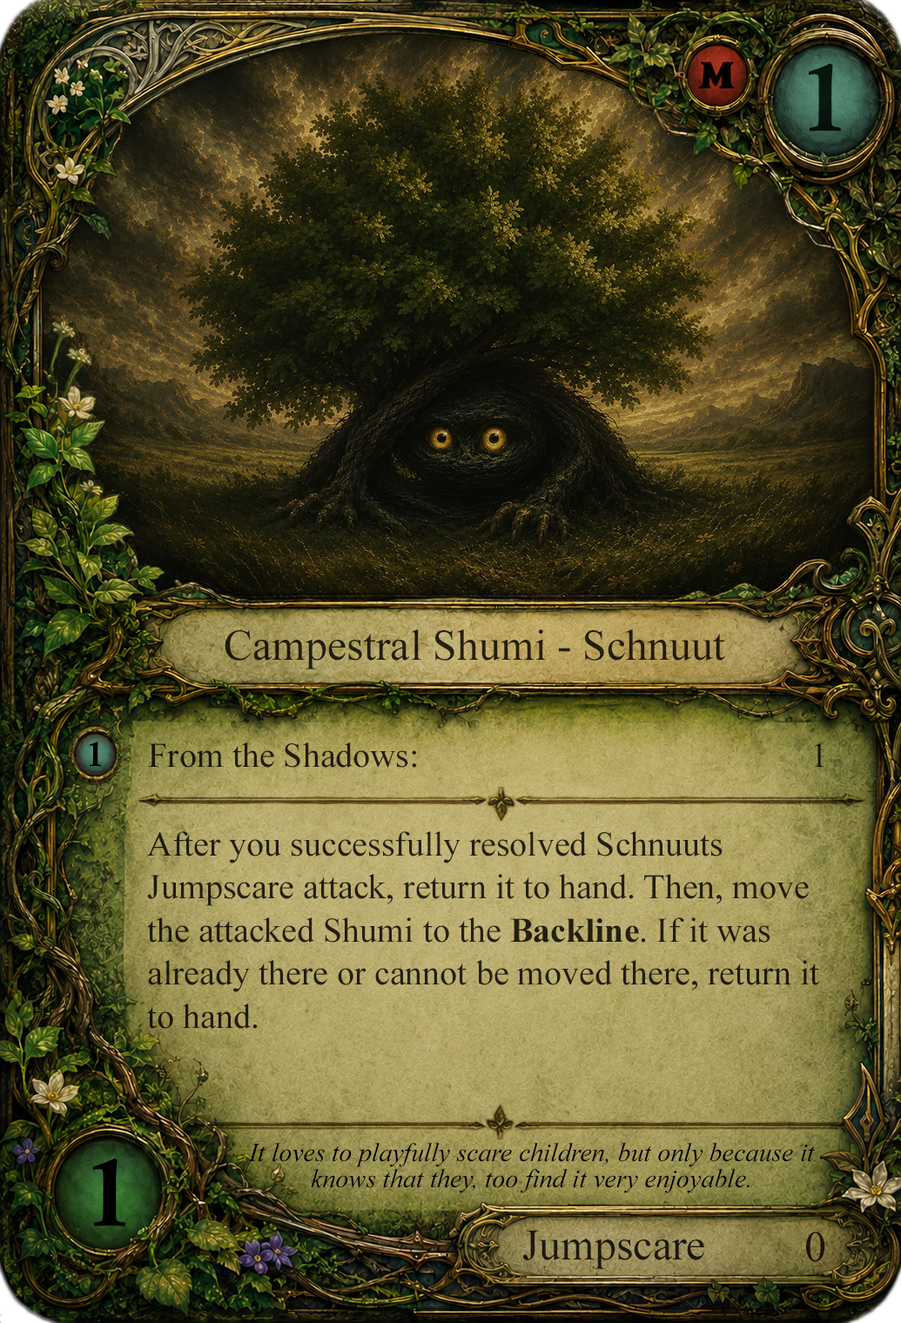
<style>
.page{position:relative;width:901px;height:1323px}
.page>*{position:absolute;margin:0}
.t1{font:95.8px "CalisMTBol";color:#000000}
.t2{font:43.5px "TimesNewRomanPSMT";color:#221d0d}
.t3{font:34.8px "CalisMTBol";color:#000000}
.t4{font:34.8px "TimesNewRomanPSMT";color:#1f1c0c}
.t5{font:34.8px/41.8px "TimesNewRomanPSMT";color:#221f10}
.t6{font:34.8px/41.8px "TimesNewRomanPS-BoldMT";color:#221f10}
.t7{font:26.1px/26.1px "TimesNewRomanPS-ItalicMT";color:#000000}
.t8{font:43.5px "TimesNewRomanPSMT";color:#1c190d}
.t9{font:43.5px "TimesNewRomanPSMT";color:#000000}
</style>
<div class="page">
<p class="t1" style="left:808px;top:64px;width:33px;height:67px;opacity:0.9">1</p>
<p class="t2" style="left:225px;top:629px;width:500px;height:41px">Campestral Shumi - Schnuut</p>
<p class="t3" style="left:89px;top:742px;width:13px;height:25px">1</p>
<p class="t4" style="left:148px;top:743px;width:676px;height:25px">From the Shadows:                                             1</p>
<p class="t5" style="left:147px;top:831px;width:672px;height:198px">After you successfully resolved Schnuuts <br>Jumpscare attack, return it to hand. Then, move <br>the attacked Shumi to the <span class="t6">Backline</span>. If it was <br>already there or cannot be moved there, return it<br>to hand.</p>
<p class="t7" style="left:248px;top:1143px;width:567px;height:51px;text-align:center">It loves to playfully scare children, but only because it <br>knows that they, too find it very enjoyable.</p>
<p class="t1" style="left:92px;top:1159px;width:33px;height:68px">1</p>
<p class="t8" style="left:523px;top:1230px;width:181px;height:39px">Jumpscare</p>
<p class="t9" style="left:806px;top:1232px;width:19px;height:30px;opacity:0.9">0</p>
</div>
